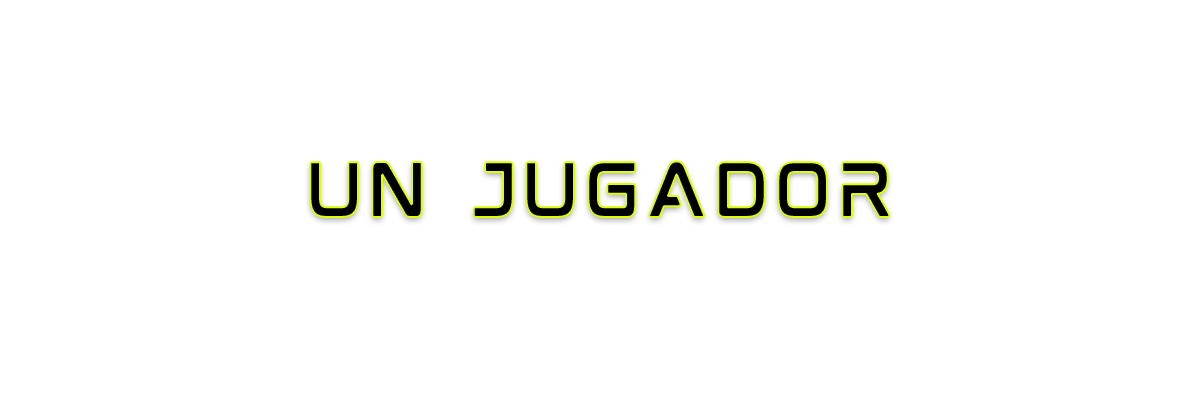
<style>
.page{position:relative;width:1200px;height:400px;background:#ffffff}
.page>*{position:absolute;margin:0}
.t1{font:66.7px "Mokoto-Regular";color:#000000}
</style>
<div class="page">
<p class="t1" style="left:310px;top:161px;width:580px;height:56px">Un jugador</p>
</div>
